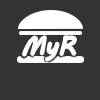
<style>
.page{position:relative;width:100px;height:100px;background:#333333}
.page>*{position:absolute;margin:0}
.t1{font:25px "MVBoli";color:#ffffff}
</style>
<div class="page">
<p class="t1" style="left:23px;top:36px;width:53px;height:25px">MyR</p>
</div>
